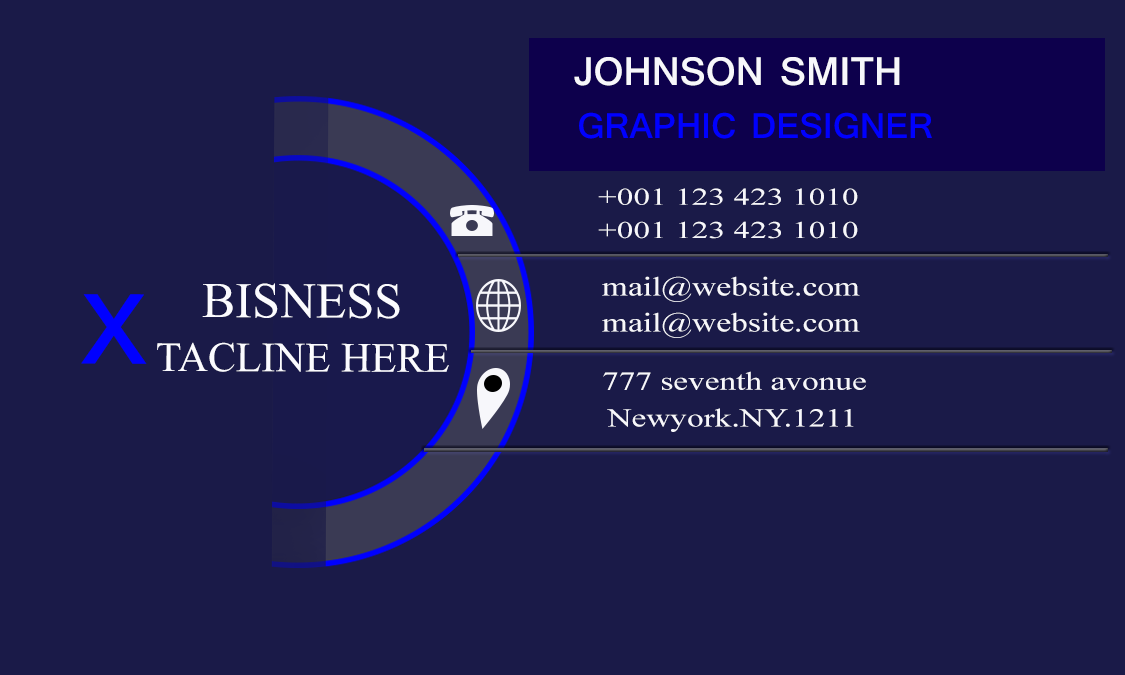
<style>
.page{position:relative;width:1125px;height:675px;background:#1a1a48}
.page>*{position:absolute;margin:0}
.t1{font:41.7px "Shruti-Bold";color:#f7f7fb}
.t2{font:37.5px "Shruti-Bold";color:#0000ff}
.t3{font:24px "TimesNewRomanPSMT";color:#f7f7fb;scale:1.39 1}
.t4{font:26.8px "TimesNewRomanPSMT";color:#f7f7fb;scale:1.25 1}
.t5{font:104.2px "Shruti-Bold";color:#0000ff}
.t6{font:50px "TimesNewRomanPSMT";color:#fbfbff}
.t7{font:41.7px "TimesNewRomanPSMT";color:#fbfbff}
.t8{font:25.6px "TimesNewRomanPSMT";color:#f7f7fb;scale:1.3 1}
</style>
<div class="page">
<p class="t1" style="left:574px;top:57px;width:326px;height:29px">JOHNSON SMITH</p>
<p class="t2" style="left:579px;top:112px;width:353px;height:27px">GRAPHIC DESIGNER</p>
<p class="t3" style="left:598px;top:188px;width:260px;height:17px">+001 123 423 1010</p>
<p class="t3" style="left:598px;top:221px;width:260px;height:18px">+001 123 423 1010</p>
<p class="t4" style="left:602px;top:276px;width:258px;height:26px">mail@website.com</p>
<p class="t5" style="left:81px;top:294px;width:66px;height:70px">X</p>
<p class="t6" style="left:202px;top:283px;width:198px;height:36px">BISNESS</p>
<p class="t4" style="left:602px;top:312px;width:258px;height:26px">mail@website.com</p>
<p class="t7" style="left:157px;top:342px;width:292px;height:30px">TACLINE HERE</p>
<p class="t8" style="left:603px;top:371px;width:263px;height:19px">777 seventh avonue</p>
<p class="t8" style="left:607px;top:408px;width:247px;height:24px">Newyork.NY.1211</p>
</div>
